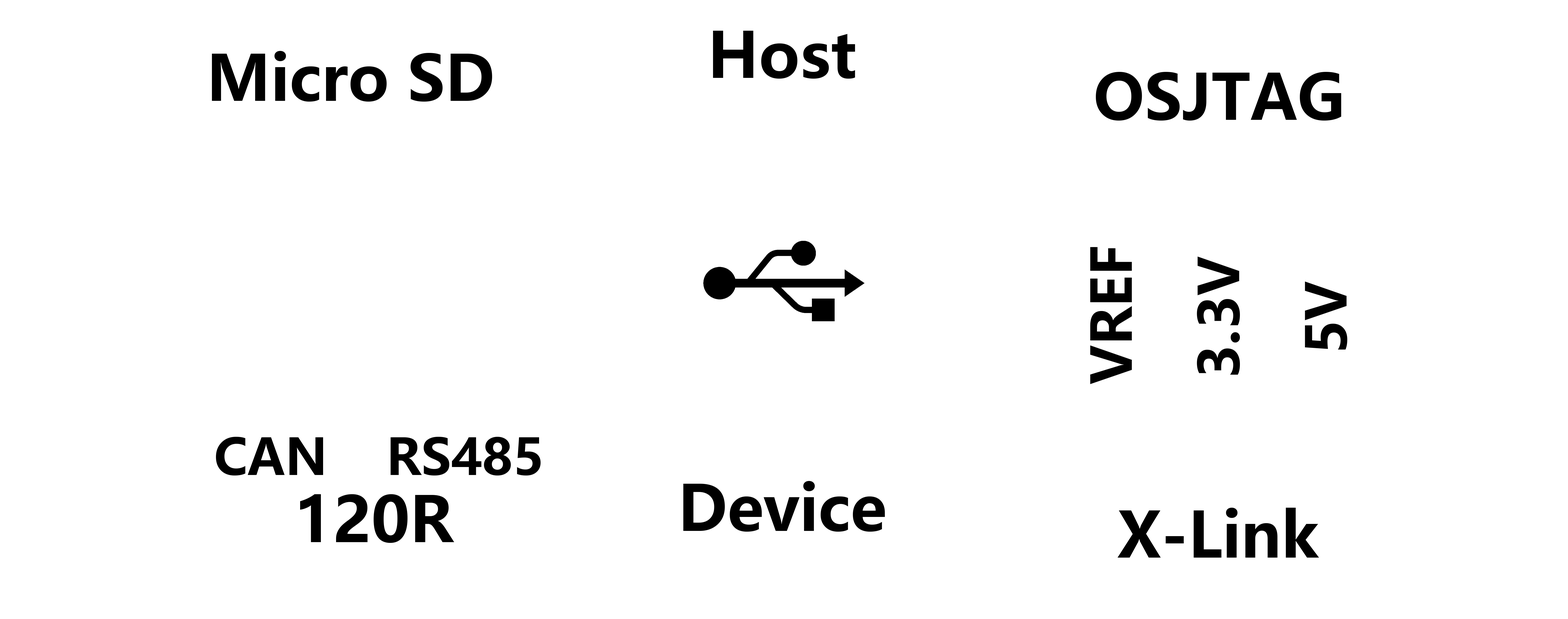
<style>
.page{position:relative;width:1568px;height:619px;background:#ffffff}
.page>*{position:absolute;margin:0}
.t1{font:62.4px "MicrosoftYaHei-Bold";color:#000000}
.t2{font:54.9px "MicrosoftYaHei-Bold";color:#000000}
.t3{font:49.9px "MicrosoftYaHei-Bold";color:#000000}
</style>
<div class="page">
<p class="t1" style="left:713px;top:31px;width:142px;height:48px">Host</p>
<p class="t1" style="left:212px;top:51px;width:280px;height:51px">Micro SD</p>
<p class="t1" style="left:1096px;top:72px;width:245px;height:49px">OSJTAG</p>
<p class="t2" style="left:1090px;top:247px;width:42px;height:137px;rotate:-90deg">VREF</p>
<p class="t2" style="left:1197px;top:256px;width:43px;height:119px;rotate:-90deg">3.3V</p>
<p class="t2" style="left:1305px;top:281px;width:42px;height:69px;rotate:-90deg">5V</p>
<p class="t3" style="left:216px;top:437px;width:107px;height:39px">CAN</p>
<p class="t3" style="left:391px;top:437px;width:150px;height:39px">RS485</p>
<p class="t1" style="left:683px;top:481px;width:202px;height:51px">Device</p>
<p class="t1" style="left:300px;top:494px;width:154px;height:49px">120R</p>
<p class="t1" style="left:1117px;top:508px;width:202px;height:50px">X-Link</p>
</div>
